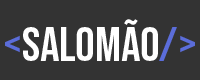
<style>
.page{position:relative;width:200px;height:80px;background:#333333}
.page>*{position:absolute;margin:0}
.t1{font:48.3px "BebasNeue-Regular";color:#ffffff}
.t2{font:48.3px "BebasNeue-Regular";color:#5b6dda}
</style>
<div class="page">
<p class="t1" style="left:5px;top:19px;width:190px;height:42px"><span class="t2">&lt;</span>SALOMÃO<span class="t2">/&gt;</span></p>
</div>
